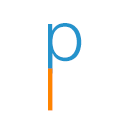
<style>
.page{position:relative;width:120px;height:120px;background:#ffffff}
.page>*{position:absolute;margin:0}
.t1{font:70.3px "HelveticaNeue-Light";color:#2493cc}
.t2{font:58.6px "HelveticaNeue-Light";color:#ff8400;scale:1.2 1}
</style>
<div class="page">
<p class="t1" style="left:48px;top:23px;width:34px;height:51px">p</p>
<p class="t2" style="left:48px;top:68px;width:5px;height:43px">l</p>
</div>
